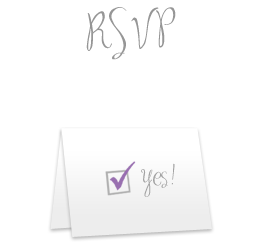
<style>
.page{position:relative;width:263px;height:247px;background:#ffffff}
.page>*{position:absolute;margin:0}
.t1{font:31.5px "MASexy";letter-spacing:0.2em;color:#969696}
.t2{font:21px "MASexy";color:#a3a3a3}
</style>
<div class="page">
<p class="t1" style="left:86px;top:7px;width:90px;height:53px">RSVP</p>
<p class="t2" style="left:141px;top:163px;width:34px;height:34px">yes !</p>
</div>
